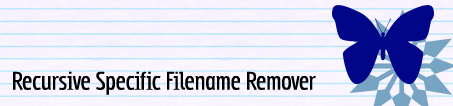
<style>
.page{position:relative;width:453px;height:106px}
.page>*{position:absolute;margin:0}
.t1{font:16px "Subpear";color:#000000}
</style>
<div class="page">
<p class="t1" style="left:13px;top:71px;width:303px;height:24px">Recursive Specific Filename Remover</p>
</div>
